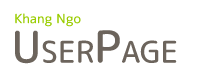
<style>
.page{position:relative;width:200px;height:80px;background:#ffffff}
.page>*{position:absolute;margin:0}
.t1{font:13px "rounded-mplus-2p-medium";color:#99cc00}
.t2{font:30px "rounded-mplus-1c-medium";color:#6c645c}
.t3{font:44px "rounded-mplus-1c-medium";color:#6c645c}
</style>
<div class="page">
<p class="t1" style="left:15px;top:13px;width:66px;height:14px">Khang Ngo</p>
<p class="t2" style="left:15px;top:30px;width:162px;height:34px"><span class="t3">U</span>SER<span class="t3">P</span>AGE</p>
</div>
